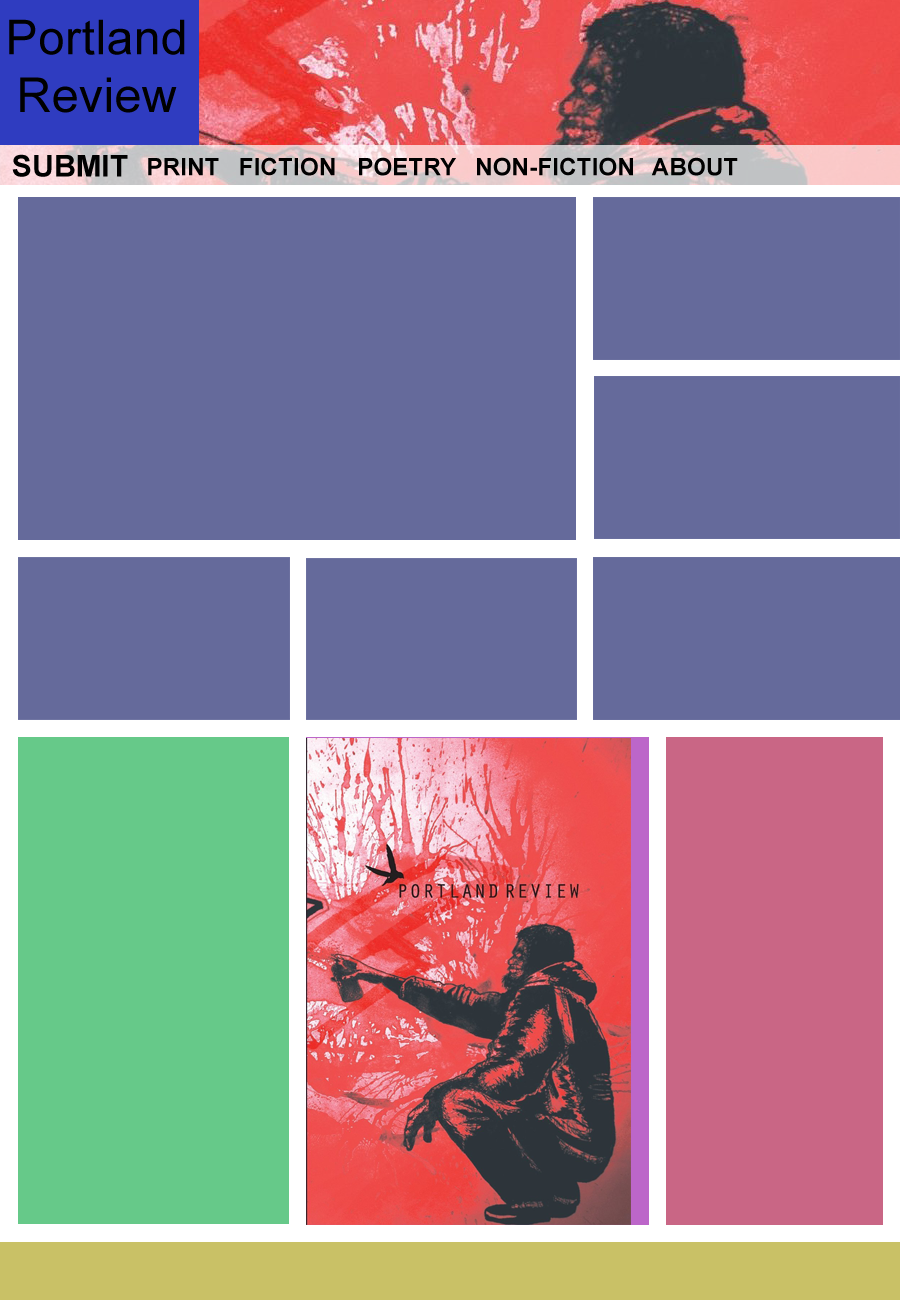
<style>
.page{position:relative;width:900px;height:1300px;background:#656a9b}
.page>*{position:absolute;margin:0}
.t1{font:48px "ArialMT";letter-spacing:0.01em;color:#000000}
.t2{font:30px "Arial-BoldMT";letter-spacing:0.01em;color:#000000}
.t3{font:24px "Arial-BoldMT";letter-spacing:0.01em;color:#000000}
</style>
<div class="page">
<p class="t1" style="left:9px;top:19px;width:176px;height:94px;text-align:center">Portland<br>Review</p>
<p class="t2" style="left:12px;top:154px;width:116px;height:23px">SUBMIT</p>
<p class="t3" style="left:148px;top:158px;width:71px;height:18px">PRINT</p>
<p class="t3" style="left:240px;top:157px;width:95px;height:19px">FICTION</p>
<p class="t3" style="left:359px;top:157px;width:97px;height:19px">POETRY</p>
<p class="t3" style="left:477px;top:157px;width:156px;height:19px">NON-FICTION</p>
<p class="t3" style="left:651px;top:157px;width:87px;height:19px">ABOUT</p>
</div>
